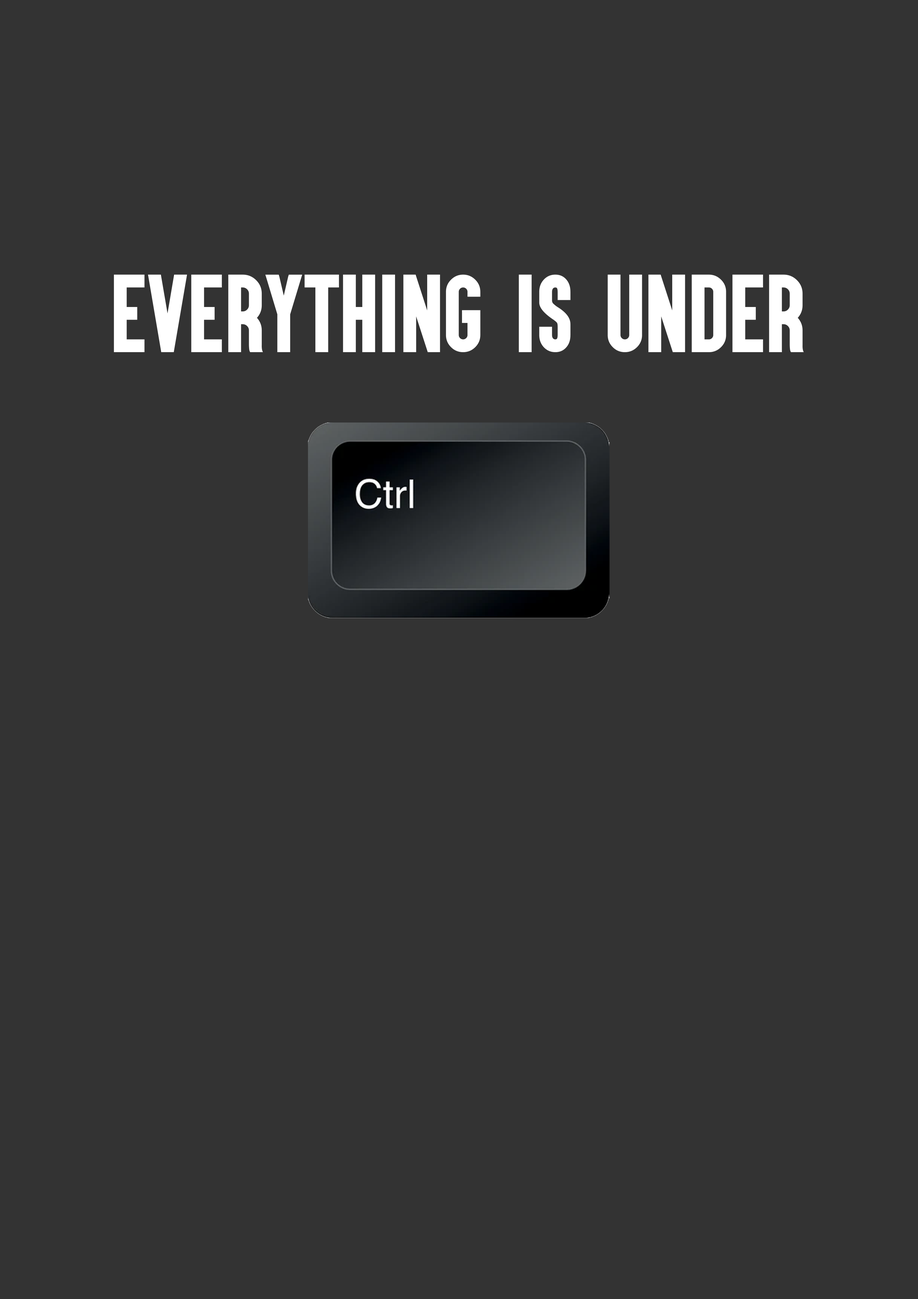
<style>
.page{position:relative;width:918px;height:1299px;background:#333333}
.page>*{position:absolute;margin:0}
.t1{font:91.3px "Aku&Kamu";color:#ffffff}
</style>
<div class="page">
<p class="t1" style="left:114px;top:274px;width:690px;height:78px">Everything is under</p>
</div>
